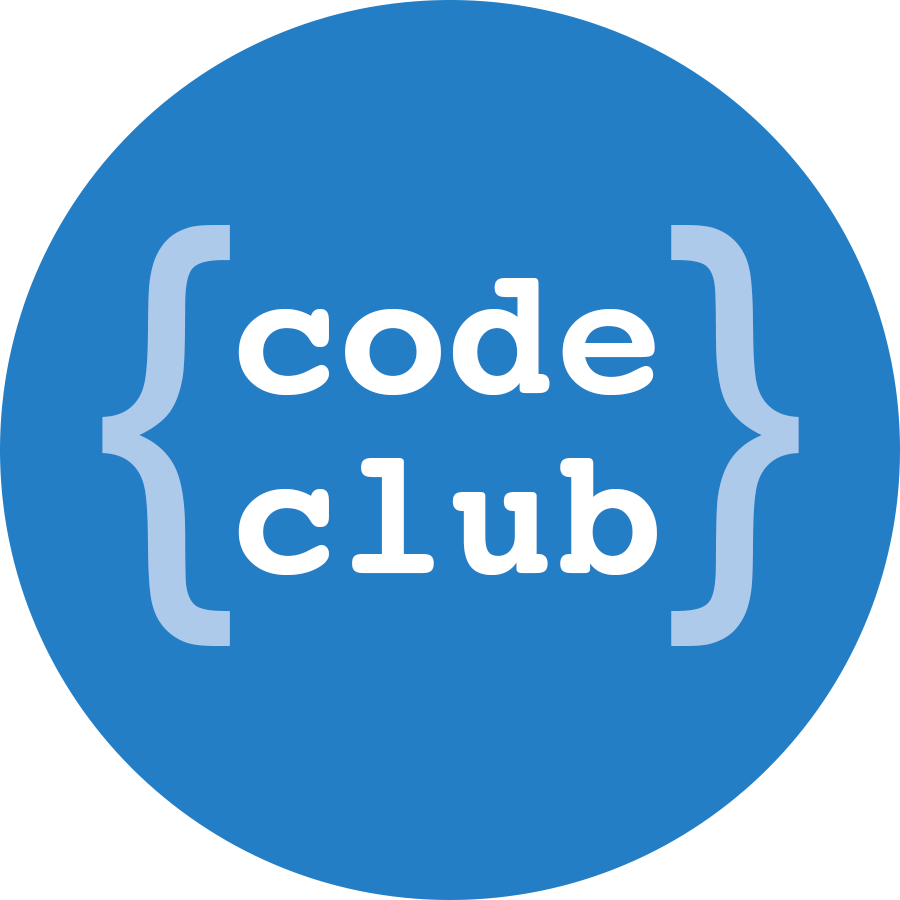
<style>
.page{position:relative;width:900px;height:900px;background:#237ec5}
.page>*{position:absolute;margin:0}
.t1{font:450px "ArialMT";color:#adcaeb}
.t2{font:180px/180px "Courier-Bold";color:#ffffff}
</style>
<div class="page">
<p class="t1" style="left:102px;top:225px;width:128px;height:421px">{</p>
<p class="t1" style="left:671px;top:225px;width:128px;height:421px">}</p>
<p class="t2" style="left:238px;top:278px;width:419px;height:297px">code<br>club</p>
</div>
